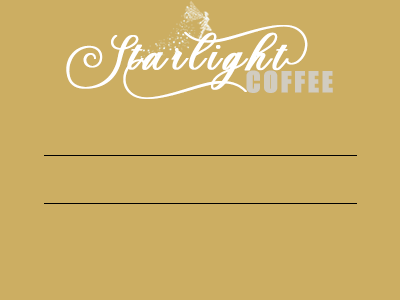
<style>
.page{position:relative;width:400px;height:300px;background:#ccae62}
.page>*{position:absolute;margin:0}
.t1{font:47px "Anitha";letter-spacing:0.08em;color:#ffffff;font-weight:bold}
.t2{font:26.6px "UTM-Impact";letter-spacing:0.08em;color:#d1ccc0;font-weight:bold}
</style>
<div class="page">
<p class="t1" style="left:66px;top:25px;width:242px;height:74px">Starlight</p>
<p class="t2" style="left:246px;top:70px;width:87px;height:23px">COFFEE</p>
</div>
